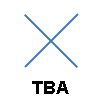
<style>
.page{position:relative;width:100px;height:100px;background:#ffffff}
.page>*{position:absolute;margin:0}
.t1{font:18px "Arial-BoldMT";color:#000000}
</style>
<div class="page">
<p class="t1" style="left:32px;top:81px;width:37px;height:13px">TBA</p>
</div>
